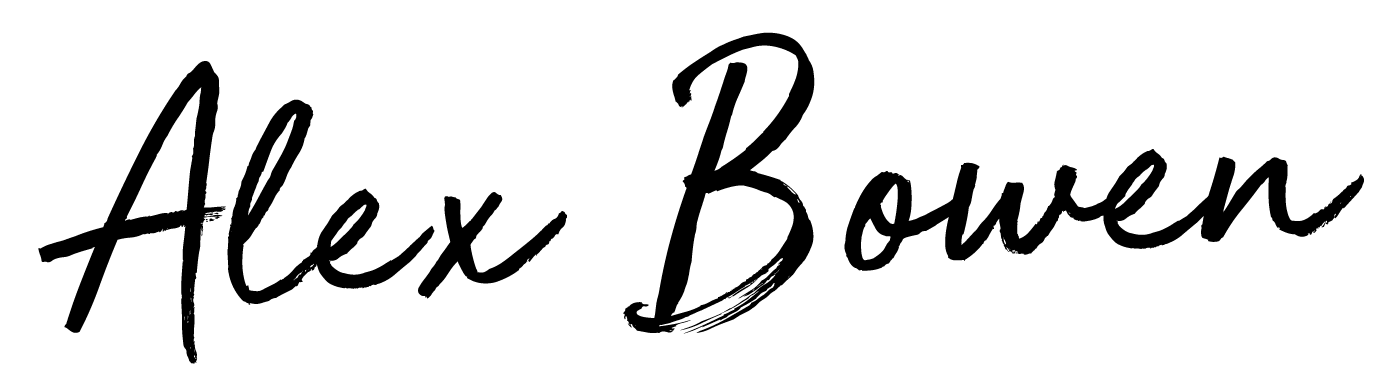
<style>
.page{position:relative;width:1400px;height:368px;background:#ffffff}
.page>*{position:absolute;margin:0}
.t1{font:343.7px "GoldenPlains";color:#000000;scale:0.86 1}
</style>
<div class="page">
<p class="t1" style="left:38px;top:32px;width:1326px;height:332px;rotate:-3deg">Alex Bowen</p>
</div>
